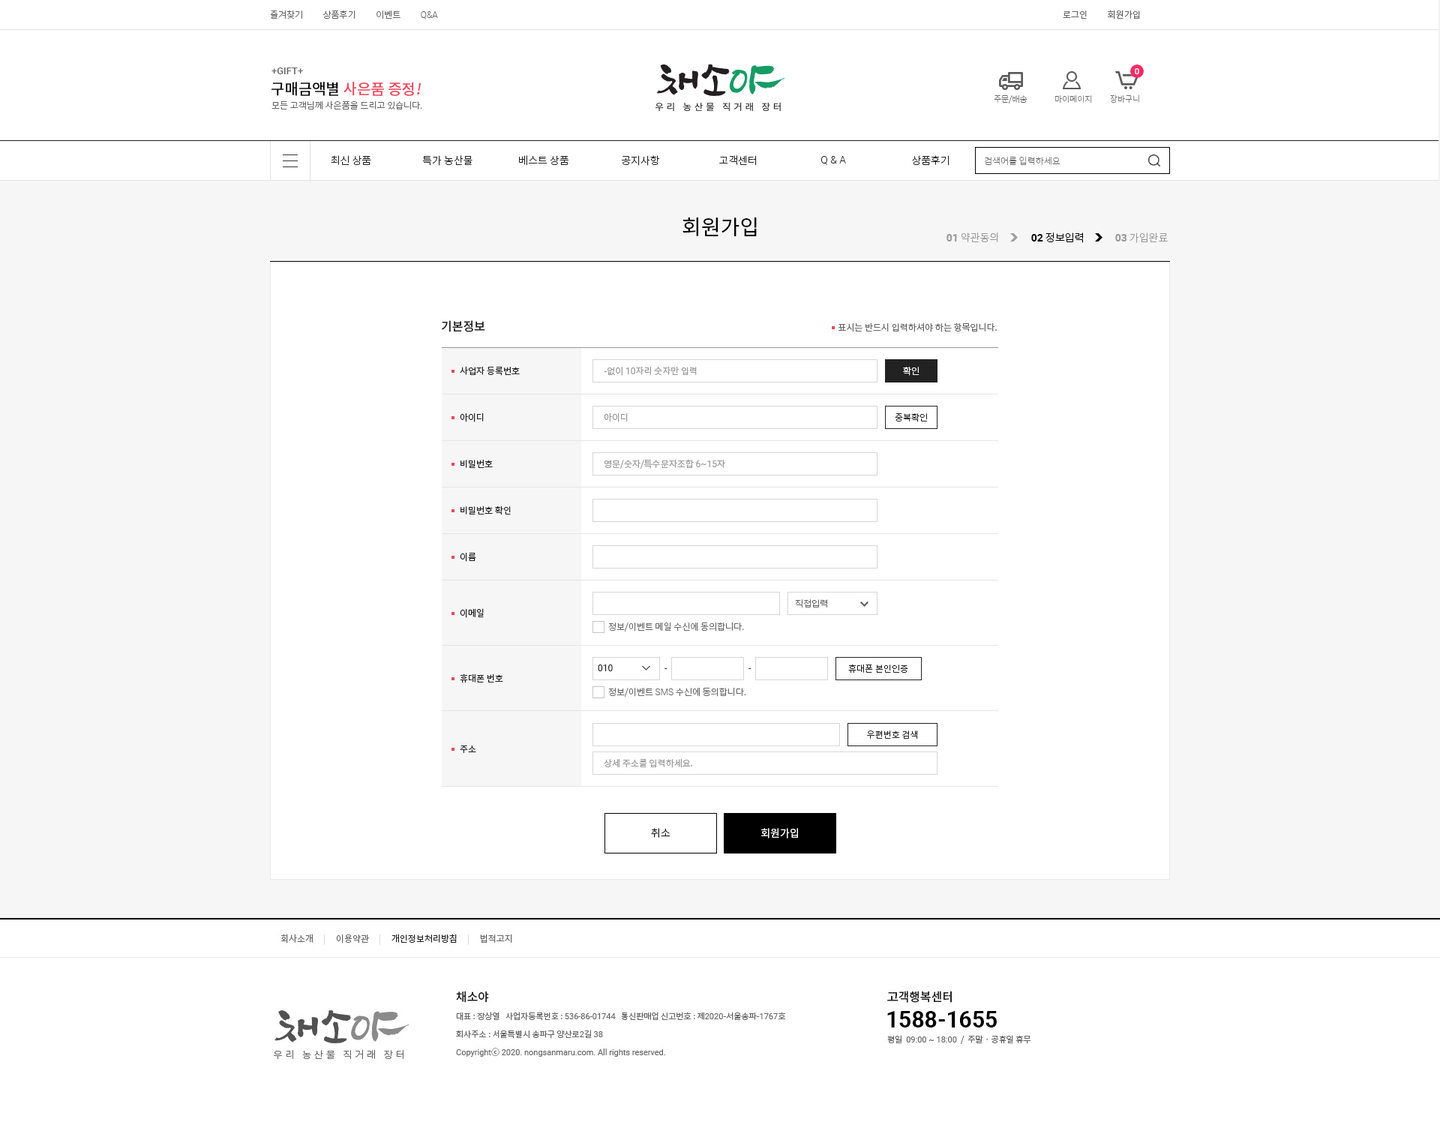
<style>
.page{position:relative;width:1440px;height:1125px;background:#ffffff}
.page>*{position:absolute;margin:0}
.t1{font:9px "NotoSansCJKkr-Light";color:#666666}
.t2{font:9px "Roboto-Light";color:#666666}
.t3{font:9px "NotoSansCJKkr-DemiLight";color:#666666}
.t4{font:9.8px "Roboto-Medium";color:#666666}
.t5{font:15px "NotoSansCJKkr-Medium";color:#ea475c}
.t6{font:15px "NotoSansCJKkr-Medium";color:#000000}
.t7{font:15px "NotoSansCJKkr-Medium";color:#ea475c;font-style:italic}
.t8{font:8.2px "NotoSansCJKkr-Thin";color:#666666}
.t9{font:10.5px "NotoSansCJKkr-Light";color:#222222}
.t10{font:10.5px "Roboto-Light";color:#222222}
.t11{font:9px "NotoSansCJKkr-Thin";color:#666666}
.t12{font:21px "NotoSansCJKkr-Regular";color:#000000}
.t13{font:10.5px "NotoSansCJKkr-Light";color:#999999}
.t14{font:10.5px "Roboto-Bold";color:#999999}
.t15{font:10.5px "NotoSansCJKkr-Light";color:#000000}
.t16{font:10.5px "Roboto-Bold";color:#000000}
.t17{font:12px "NotoSansCJKkr-Medium";color:#222222}
.t18{font:9px "NotoSansCJKkr-Regular";color:#666666}
.t19{font:9px "NotoSansCJKkr-Regular";color:#222222}
.t20{font:9px "NotoSansCJKkr-Regular";color:#999999}
.t21{font:9px "Roboto-Regular";color:#999999}
.t22{font:9px "NotoSansCJKkr-Light";color:#ffffff}
.t23{font:9px "NotoSansCJKkr-Light";color:#222222}
.t24{font:9px "Roboto-Regular";color:#222222}
.t25{font:10.5px "NotoSansCJKkr-DemiLight";color:#222222}
.t26{font:10.5px "NotoSansCJKkr-DemiLight";color:#ffffff}
</style>
<div class="page">
<p class="t1" style="left:270px;top:10px;width:168px;height:10px">즐겨찾기          상품후기          이벤트          <span class="t2">Q&amp;A</span></p>
<p class="t3" style="left:1063px;top:10px;width:77px;height:10px">로그인          회원가입</p>
<p class="t4" style="left:272px;top:68px;width:31px;height:6px">+GIFT+</p>
<p class="t5" style="left:272px;top:82px;width:150px;height:14px"><span class="t6">구매금액별 </span>사은품 증정<span class="t7">!</span></p>
<p class="t1" style="left:272px;top:100px;width:150px;height:10px">모든 고객님께 사은품을 드리고 있습니다.</p>
<p class="t8" style="left:994px;top:94px;width:34px;height:10px">주문/배송</p>
<p class="t8" style="left:1054px;top:95px;width:38px;height:9px">마이페이지</p>
<p class="t8" style="left:1110px;top:94px;width:29px;height:10px">장바구니</p>
<p class="t9" style="left:331px;top:155px;width:40px;height:10px">최신 상품</p>
<p class="t9" style="left:422px;top:155px;width:50px;height:11px">특가 농산물</p>
<p class="t9" style="left:519px;top:155px;width:50px;height:11px">베스트 상품</p>
<p class="t9" style="left:622px;top:155px;width:38px;height:11px">공지사항</p>
<p class="t9" style="left:719px;top:155px;width:38px;height:11px">고객센터</p>
<p class="t10" style="left:821px;top:156px;width:25px;height:9px">Q &amp; A</p>
<p class="t9" style="left:912px;top:155px;width:38px;height:11px">상품후기</p>
<p class="t11" style="left:984px;top:156px;width:76px;height:10px">검색어를 입력하세요</p>
<p class="t12" style="left:682px;top:217px;width:75px;height:20px">회원가입</p>
<p class="t13" style="left:946px;top:232px;width:52px;height:10px"><span class="t14">01</span> 약관동의</p>
<p class="t15" style="left:1031px;top:232px;width:52px;height:11px"><span class="t16">02</span> 정보입력</p>
<p class="t13" style="left:1115px;top:232px;width:53px;height:11px"><span class="t14">03</span> 가입완료</p>
<p class="t17" style="left:442px;top:320px;width:43px;height:12px">기본정보</p>
<p class="t18" style="left:838px;top:322px;width:159px;height:10px">표시는 반드시 입력하셔야 하는 항목입니다.</p>
<p class="t19" style="left:460px;top:366px;width:60px;height:10px">사업자 등록번호</p>
<p class="t20" style="left:604px;top:366px;width:93px;height:10px">-없이 <span class="t21">10</span>자리 숫자만 입력</p>
<p class="t22" style="left:903px;top:367px;width:17px;height:9px">확인</p>
<p class="t19" style="left:460px;top:413px;width:24px;height:9px">아이디</p>
<p class="t20" style="left:604px;top:413px;width:24px;height:9px">아이디</p>
<p class="t23" style="left:895px;top:413px;width:33px;height:9px">중복확인</p>
<p class="t19" style="left:460px;top:460px;width:33px;height:8px">비밀번호</p>
<p class="t20" style="left:604px;top:459px;width:121px;height:10px">영문/숫자/특수문자조합 <span class="t21">6~15</span>자</p>
<p class="t19" style="left:460px;top:506px;width:51px;height:9px">비밀번호 확인</p>
<p class="t19" style="left:460px;top:553px;width:16px;height:9px">이름</p>
<p class="t1" style="left:795px;top:599px;width:32px;height:9px">직접입력</p>
<p class="t19" style="left:460px;top:608px;width:24px;height:10px">이메일</p>
<p class="t1" style="left:608px;top:622px;width:136px;height:10px">정보/이벤트 메일 수신에 동의합니다.</p>
<p class="t24" style="left:598px;top:664px;width:15px;height:7px">010</p>
<p class="t23" style="left:848px;top:664px;width:60px;height:10px">휴대폰 본인인증</p>
<p class="t19" style="left:460px;top:674px;width:43px;height:9px">휴대폰 번호</p>
<p class="t24" style="left:664px;top:668px;width:4px;height:1px">-</p>
<p class="t24" style="left:748px;top:668px;width:4px;height:1px">-</p>
<p class="t1" style="left:608px;top:688px;width:138px;height:9px">정보/이벤트 <span class="t2">SMS</span> 수신에 동의합니다.</p>
<p class="t23" style="left:867px;top:730px;width:51px;height:9px">우편번호 검색</p>
<p class="t19" style="left:460px;top:746px;width:16px;height:7px">주소</p>
<p class="t20" style="left:604px;top:759px;width:88px;height:9px">상세 주소를 입력하세요.</p>
<p class="t25" style="left:651px;top:828px;width:19px;height:10px">취소</p>
<p class="t26" style="left:761px;top:828px;width:37px;height:10px">회원가입</p>
</div>
